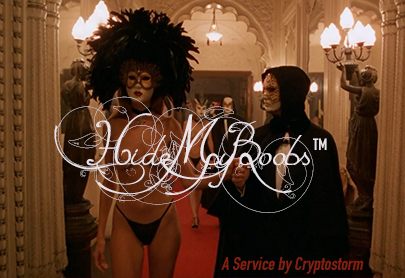
<style>
.page{position:relative;width:405px;height:278px}
.page>*{position:absolute;margin:0}
.t1{font:72px "EternalCall";color:#eae4e8}
.t2{font:16px "DINEngschriftStd";color:#eae4e8}
.t3{font:18px "DINEngschriftStd";color:#842011;font-style:italic}
</style>
<div class="page">
<p class="t1" style="left:54px;top:96px;width:260px;height:117px">HideMyBoobs</p>
<p class="t2" style="left:313px;top:138px;width:14px;height:12px">TM</p>
<p class="t3" style="left:221px;top:257px;width:143px;height:17px">A Service by Cryptostorm</p>
</div>
